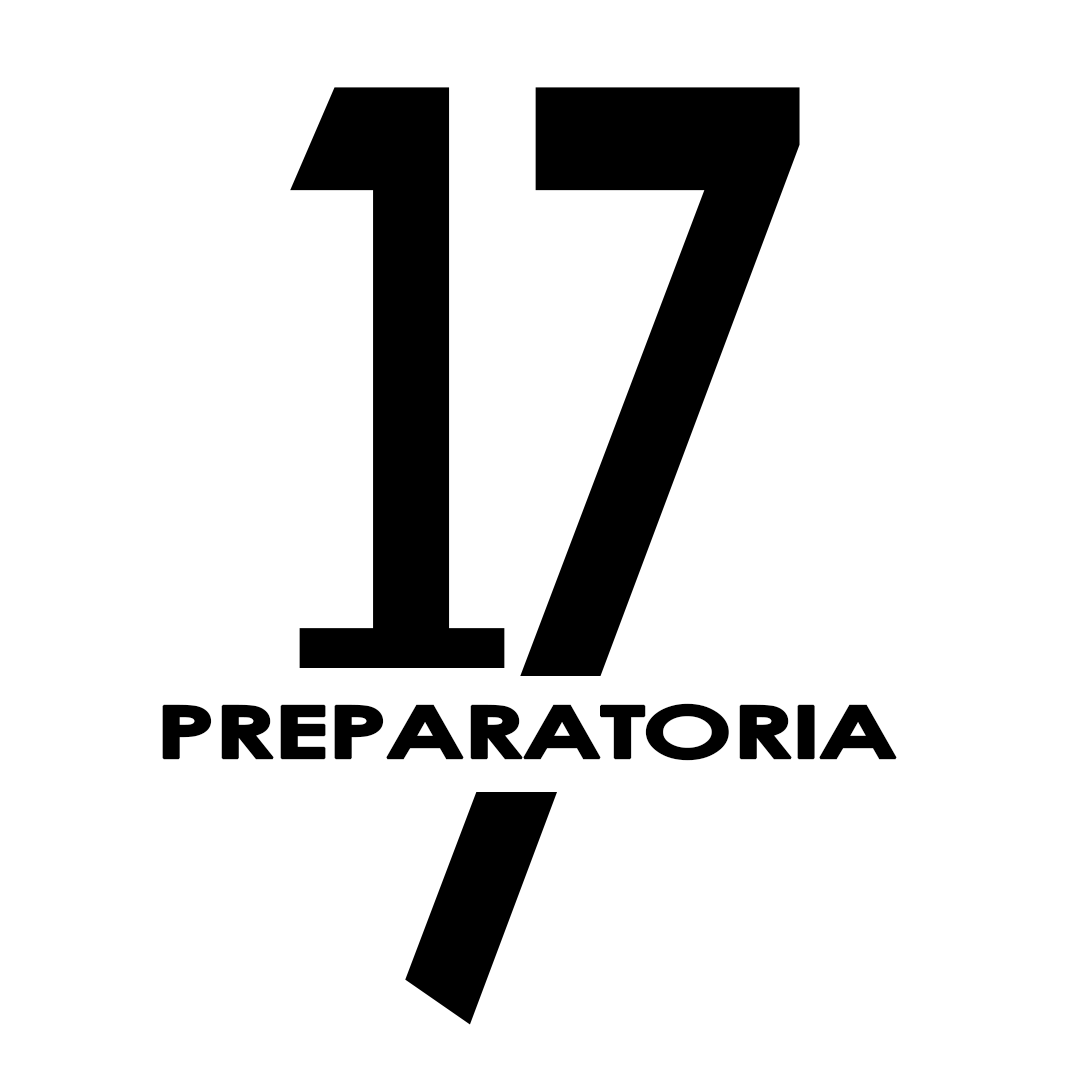
<style>
.page{position:relative;width:1080px;height:1080px;background:#ffffff}
.page>*{position:absolute;margin:0}
.t1{font:72px "CenturyGothic-Bold";letter-spacing:-0.05em;color:#000000;font-weight:bold;scale:1.5 1}
</style>
<div class="page">
<p class="t1" style="left:162px;top:703px;width:735px;height:58px">PREPARATORIA</p>
</div>
